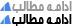
<style>
.page{position:relative;width:73px;height:26px;background:#ffffff}
.page>*{position:absolute;margin:0}
.t1{font:14px "BBardiyaBold";color:#979797}
.t2{font:14px "BBardiyaBold";color:#000000}
</style>
<div class="page">
<p class="t1" style="left:12px;top:1px;width:60px;height:12px">ادامـه مطالب</p>
<p class="t2" style="left:12px;top:14px;width:60px;height:12px">ادامـه مطالب</p>
</div>
